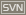
<style>
.page{position:relative;width:26px;height:15px;background:#837e72}
.page>*{position:absolute;margin:0}
.t1{font:10px "HandelGotD-Ligh";color:#e0dfdc}
</style>
<div class="page">
<p class="t1" style="left:3px;top:4px;width:20px;height:7px">SVN</p>
</div>
